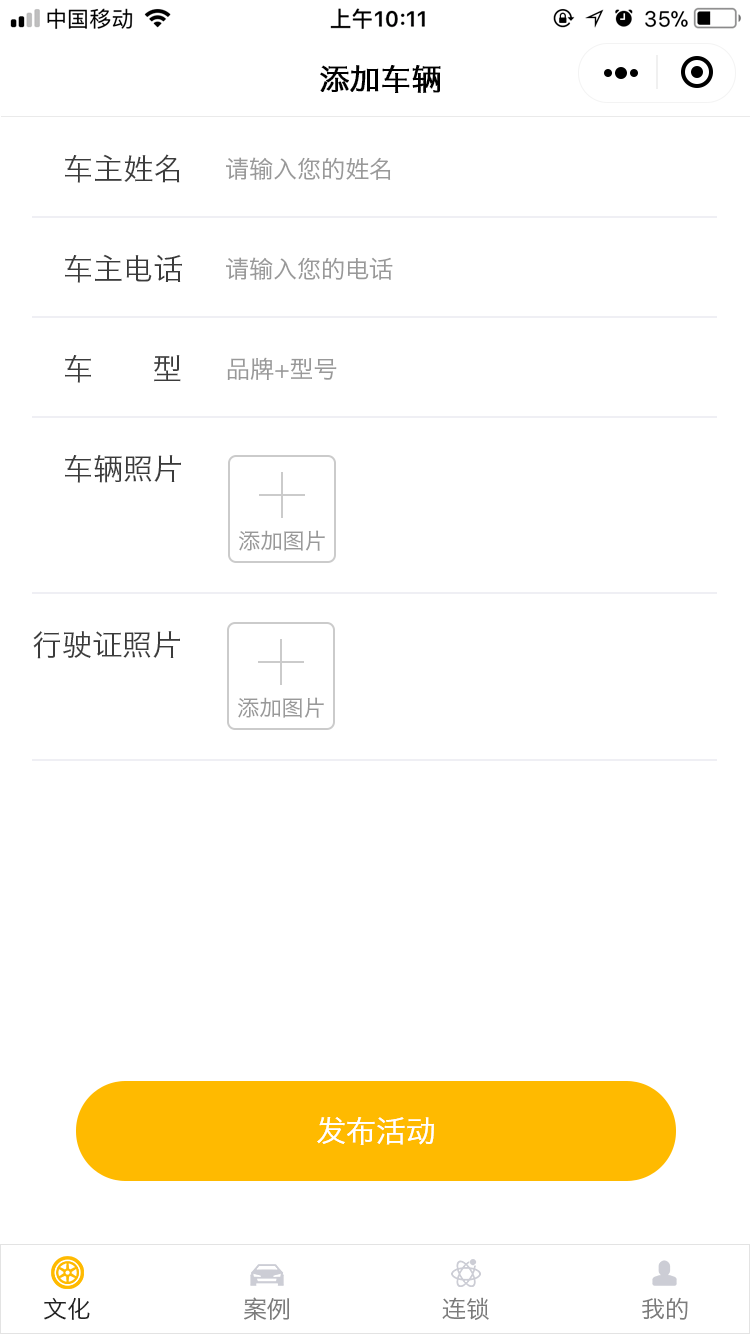
<style>
.page{position:relative;width:750px;height:1334px;background:#ffffff}
.page>*{position:absolute;margin:0}
.t1{font:30px "HiraginoSansGB-W3";color:#000000;text-transform:uppercase;font-weight:bold}
.t2{font:30px "HiraginoSansGB-W3";color:#3b3b3b;text-transform:uppercase}
.t3{font:24px "HiraginoSansGB-W3";color:#999999;text-transform:uppercase}
.t4{font:22px "HiraginoSansGB-W3";color:#999999}
.t5{font:30px "HiraginoSansGB-W3";color:#ffffff;text-transform:uppercase}
.t6{font:24px "HiraginoSansGB-W3";color:#232323;text-transform:uppercase}
.t7{font:24px "HiraginoSansGB-W3";color:#7c7c7c;text-transform:uppercase}
</style>
<div class="page">
<p class="t1" style="left:320px;top:65px;width:121px;height:28px">添加车辆</p>
<p class="t2" style="left:65px;top:154px;width:115px;height:29px">车主姓名</p>
<p class="t3" style="left:226px;top:157px;width:165px;height:23px">请输入您的姓名</p>
<p class="t2" style="left:65px;top:254px;width:117px;height:29px">车主电话</p>
<p class="t3" style="left:226px;top:257px;width:167px;height:23px">请输入您的电话</p>
<p class="t2" style="left:65px;top:355px;width:116px;height:28px">车      型</p>
<p class="t3" style="left:227px;top:357px;width:110px;height:23px">品牌+型号</p>
<p class="t2" style="left:65px;top:455px;width:116px;height:28px">车辆照片</p>
<p class="t4" style="left:239px;top:530px;width:86px;height:21px">添加图片</p>
<p class="t2" style="left:33px;top:631px;width:147px;height:28px">行驶证照片</p>
<p class="t4" style="left:238px;top:697px;width:86px;height:21px">添加图片</p>
<p class="t5" style="left:317px;top:1117px;width:117px;height:28px">发布活动</p>
<p class="t6" style="left:44px;top:1297px;width:46px;height:23px">文化</p>
<p class="t7" style="left:244px;top:1297px;width:46px;height:23px">案例</p>
<p class="t7" style="left:442px;top:1297px;width:47px;height:23px">连锁</p>
<p class="t7" style="left:642px;top:1297px;width:46px;height:23px">我的</p>
</div>
